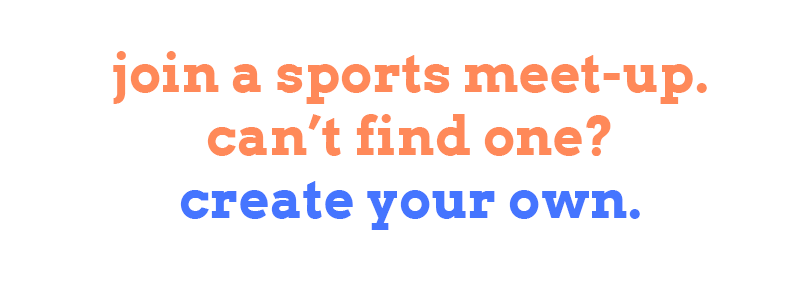
<style>
.page{position:relative;width:800px;height:301px;background:#ffffff}
.page>*{position:absolute;margin:0}
.t1{font:52.7px "Arvo-Bold";letter-spacing:0.01em;color:#ff8959}
.t2{font:52.7px "Arvo-Bold";letter-spacing:0.01em;color:#4575ff}
</style>
<div class="page">
<p class="t1" style="left:113px;top:51px;width:594px;height:179px;text-align:center">join a sports meet-up.<br>can’t find one?<br><span class="t2">create your own.</span></p>
</div>
